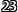
<style>
.page{position:relative;width:18px;height:12px;background:#ffffff}
.page>*{position:absolute;margin:0}
.t1{font:17px "Perpetua-Bold";color:#ffffff}
</style>
<div class="page">
<p class="t1" style="left:2px;top:1px;width:15px;height:10px">23</p>
</div>
